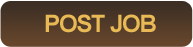
<style>
.page{position:relative;width:193px;height:47px}
.page>*{position:absolute;margin:0}
.t1{font:24px "Arial-BoldMT";letter-spacing:-0.05em;color:#e8b955;text-transform:uppercase}
</style>
<div class="page">
<p class="t1" style="left:45px;top:14px;width:111px;height:19px">post job</p>
</div>
